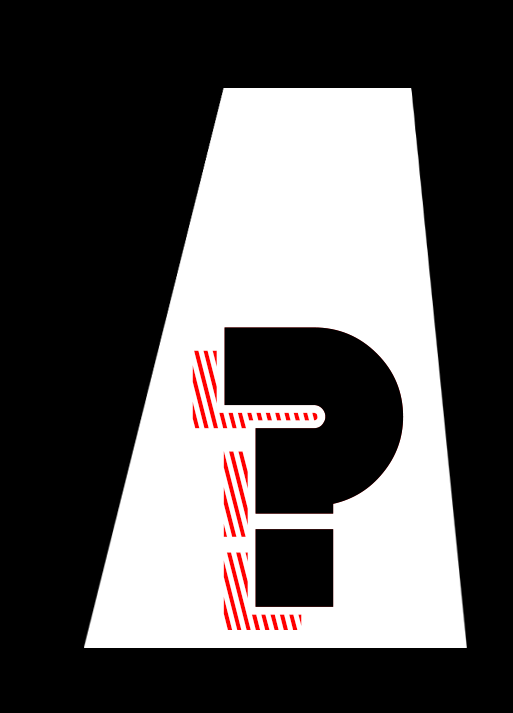
<style>
.page{position:relative;width:513px;height:713px;background:#000000}
.page>*{position:absolute;margin:0}
.t1{font:400px "Portico-Vintage";color:#000000}
</style>
<div class="page">
<p class="t1" style="left:192px;top:327px;width:212px;height:303px">?</p>
</div>
